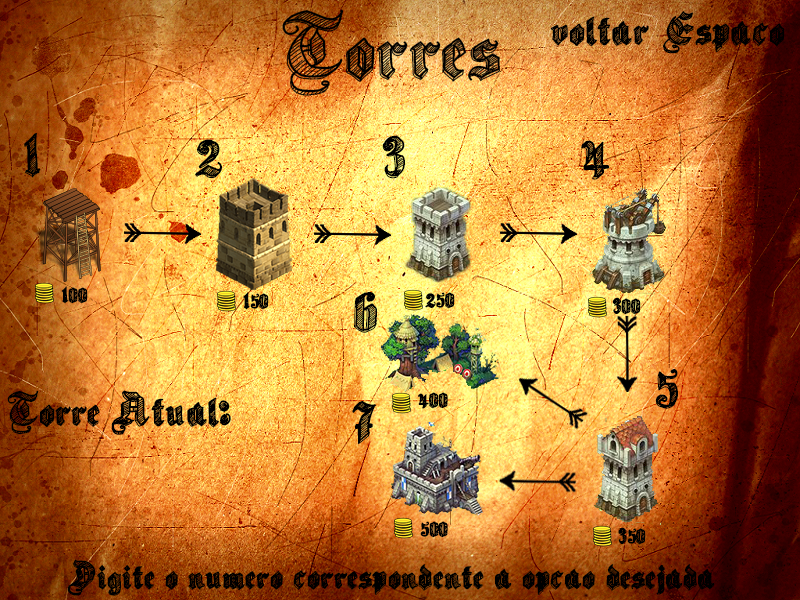
<style>
.page{position:relative;width:800px;height:600px}
.page>*{position:absolute;margin:0}
.t1{font:96px "SketchGothicSchool";color:#000000}
.t2{font:48px "SketchGothicSchool";color:#000000}
.t3{font:64px "SketchGothicSchool";color:#000000}
.t4{font:24px "SketchGothicSchool";color:#000000}
.t5{font:40px "SketchGothicSchool";color:#000000}
</style>
<div class="page">
<p class="t1" style="left:282px;top:9px;width:218px;height:87px">Torres</p>
<p class="t2" style="left:550px;top:11px;width:235px;height:43px">voltar Espaco</p>
<p class="t3" style="left:24px;top:132px;width:17px;height:46px">1</p>
<p class="t3" style="left:195px;top:135px;width:483px;height:274px">2          3           4<br><br>          6<br>                             5</p>
<p class="t4" style="left:61px;top:286px;width:27px;height:18px">100</p>
<p class="t4" style="left:243px;top:292px;width:26px;height:18px">150</p>
<p class="t4" style="left:425px;top:292px;width:30px;height:17px">250</p>
<p class="t4" style="left:612px;top:297px;width:29px;height:18px">300</p>
<p class="t2" style="left:7px;top:390px;width:224px;height:45px">Torre Atual:</p>
<p class="t3" style="left:352px;top:401px;width:24px;height:44px">7</p>
<p class="t4" style="left:418px;top:392px;width:30px;height:17px">400</p>
<p class="t4" style="left:420px;top:521px;width:28px;height:17px">500</p>
<p class="t4" style="left:618px;top:527px;width:28px;height:18px">350</p>
<p class="t5" style="left:67px;top:559px;width:648px;height:37px">Digite o numero correspondente a opcao desejada</p>
</div>
